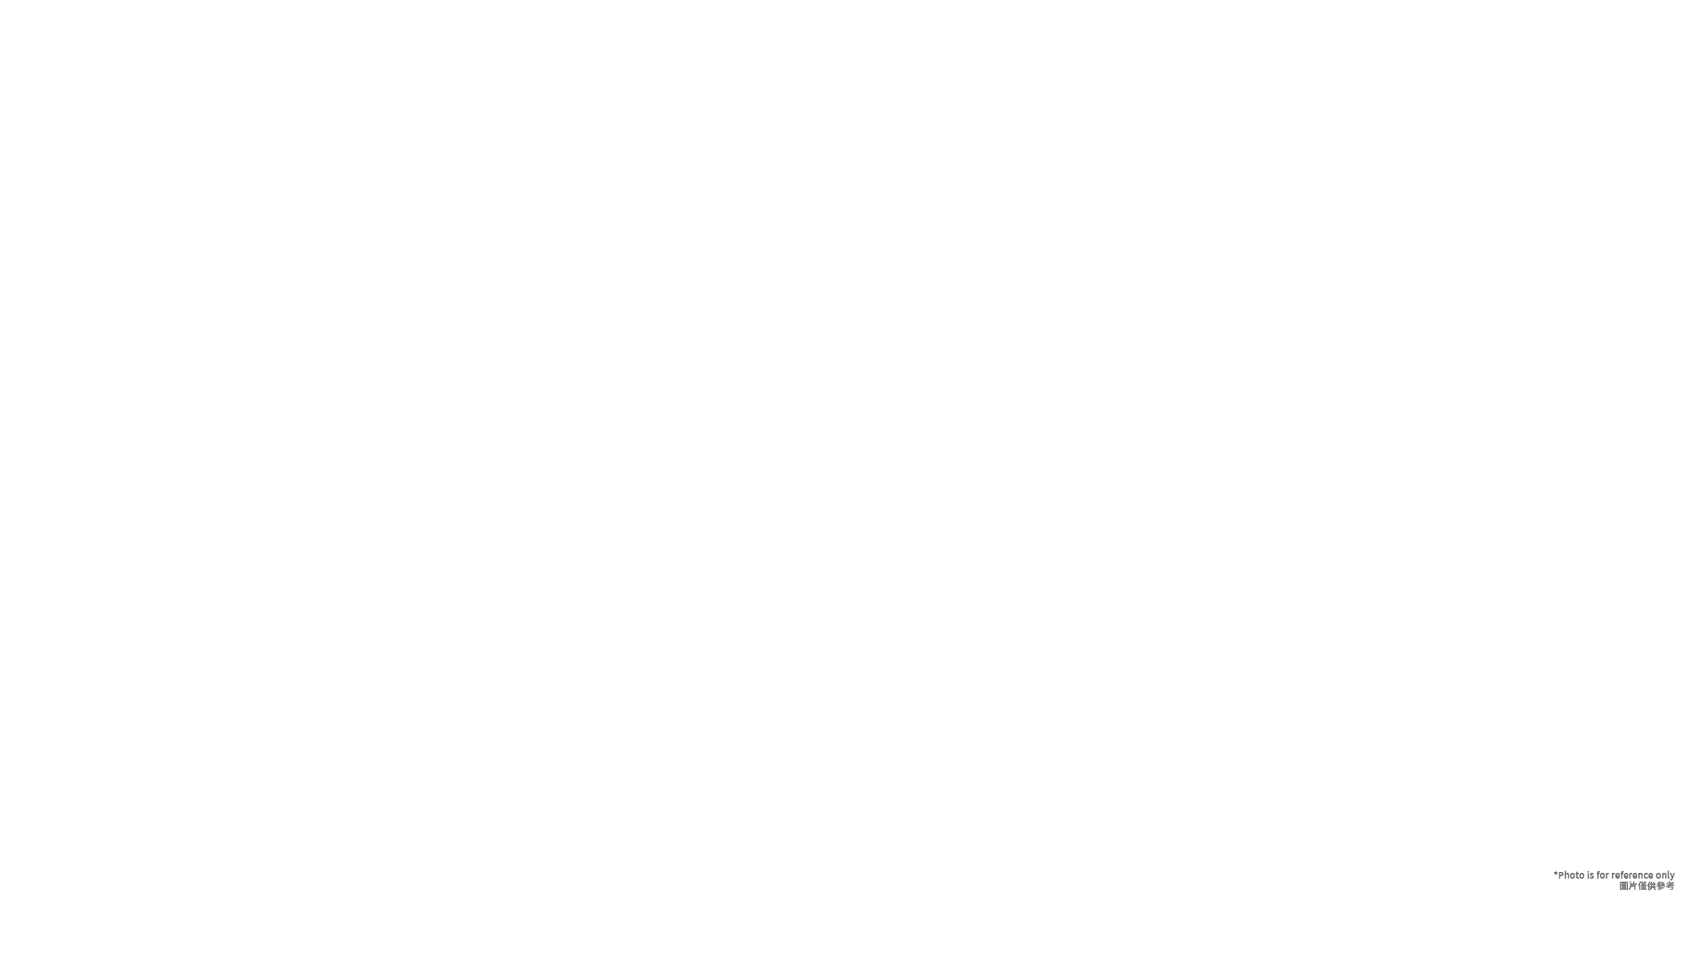
<style>
.page{position:relative;width:1707px;height:960px;background:#ffffff}
.page>*{position:absolute;margin:0}
.t1{font:9px "TaipeiSansTCBeta-Regular";color:#6e6e6e;font-weight:bold}
</style>
<div class="page">
<p class="t1" style="left:1554px;top:870px;width:121px;height:21px;text-align:right">*Photo is for reference only<br>圖片僅供參考</p>
</div>
